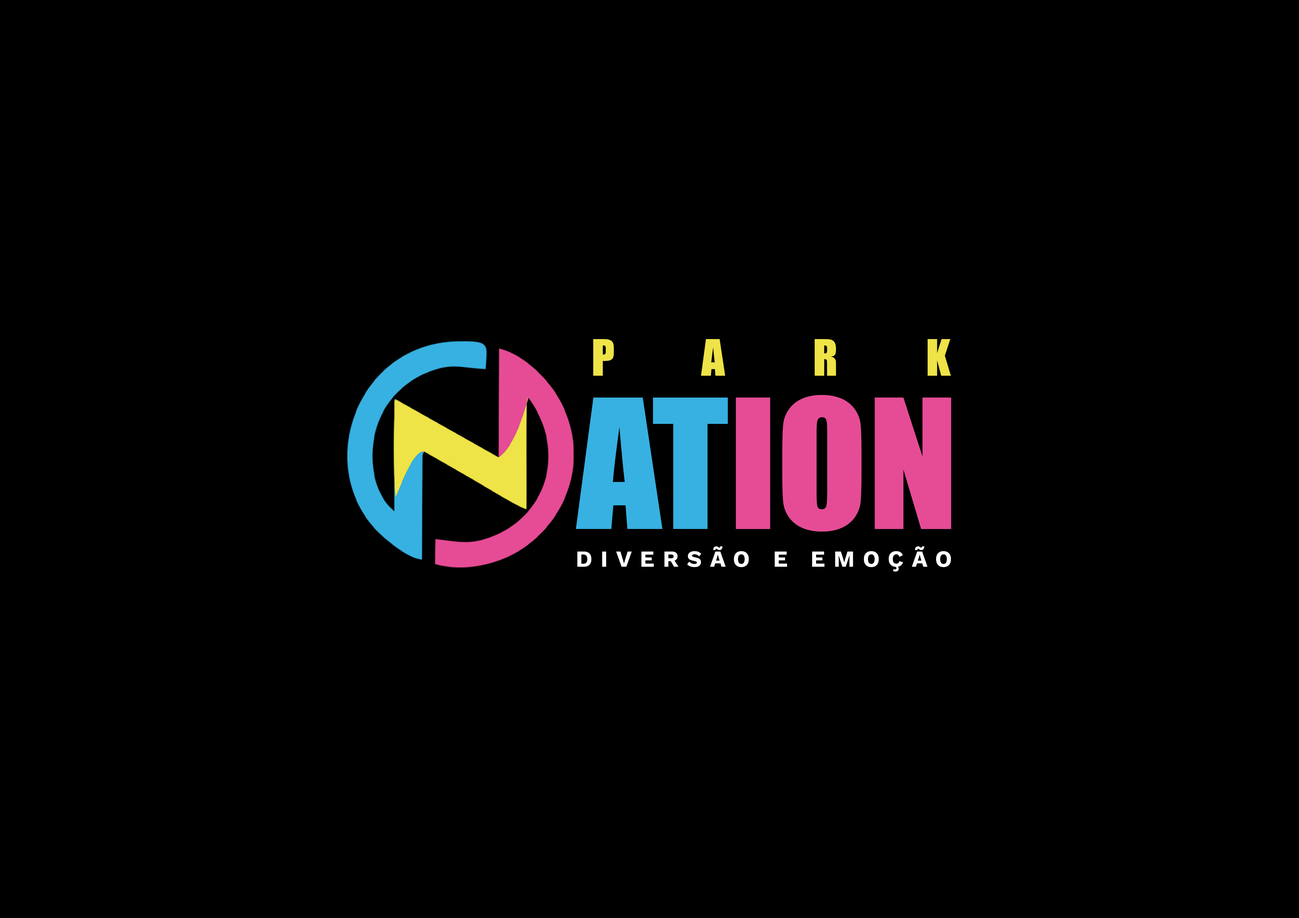
<style>
.page{position:relative;width:1299px;height:918px;background:#000000}
.page>*{position:absolute;margin:0}
.t1{font:46.3px "Impact";letter-spacing:1.9em;color:#eee347}
.t2{font:166.3px "Impact";color:#e64c96}
.t3{font:166.3px "Impact";color:#37b1e1}
.t4{font:23.1px "WorkSans-Bold";letter-spacing:0.35em;color:#ffffff;text-transform:uppercase}
</style>
<div class="page">
<p class="t1" style="left:593px;top:339px;width:358px;height:37px">PARK</p>
<p class="t2" style="left:576px;top:395px;width:375px;height:137px"><span class="t3">AT</span>ION</p>
<p class="t4" style="left:577px;top:546px;width:374px;height:26px">diversão e emoção</p>
</div>
